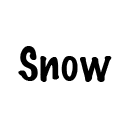
<style>
.page{position:relative;width:128px;height:128px;background:#ffffff}
.page>*{position:absolute;margin:0}
.t1{font:41.7px "MarkerFelt-Thin";color:#000000}
</style>
<div class="page">
<p class="t1" style="left:18px;top:46px;width:94px;height:36px">Snow</p>
</div>
